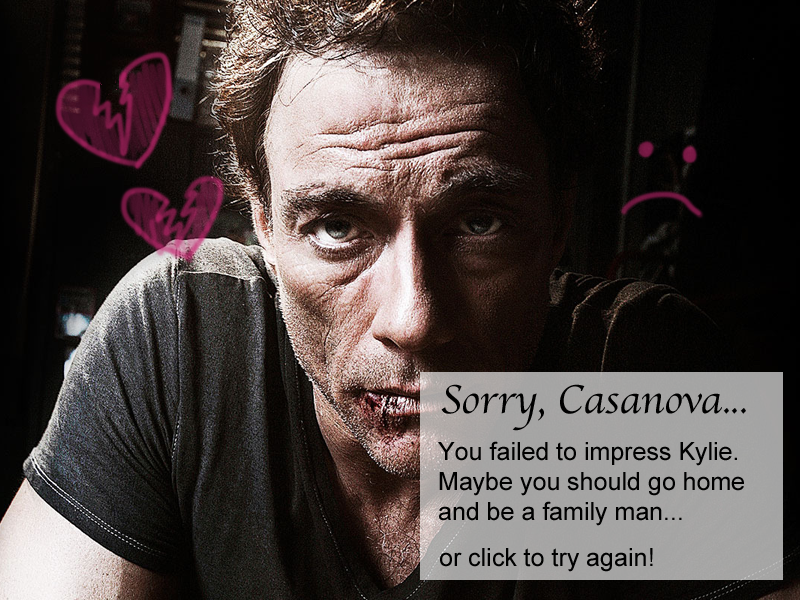
<style>
.page{position:relative;width:800px;height:600px}
.page>*{position:absolute;margin:0}
.t1{font:41.7px "Apple-Chancery";color:#000000}
.t2{font:25px "ArialMT";color:#000000}
</style>
<div class="page">
<p class="t1" style="left:441px;top:384px;width:305px;height:47px">Sorry, Casanova...</p>
<p class="t2" style="left:438px;top:441px;width:306px;height:85px">You failed to impress Kylie. Maybe you should go home and be a family man...</p>
<p class="t2" style="left:440px;top:548px;width:213px;height:24px">or click to try again!</p>
</div>
